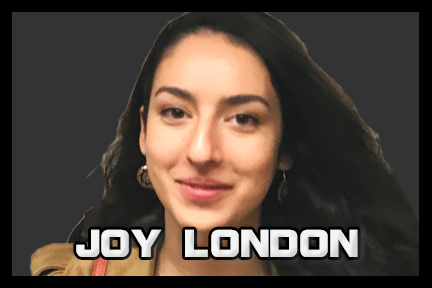
<style>
.page{position:relative;width:432px;height:288px;background:#333333}
.page>*{position:absolute;margin:0}
.t1{font:41.7px "BolsterBold";color:#f3f3f3}
</style>
<div class="page">
<p class="t1" style="left:76px;top:229px;width:282px;height:28px">JOY LONDON</p>
</div>
